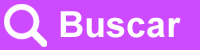
<style>
.page{position:relative;width:200px;height:50px;background:#cd4aff}
.page>*{position:absolute;margin:0}
.t1{font:36px "Arial-BoldMT";color:#ffffff}
</style>
<div class="page">
<p class="t1" style="left:60px;top:11px;width:121px;height:27px">Buscar</p>
</div>
